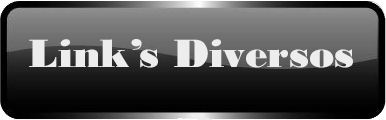
<style>
.page{position:relative;width:386px;height:120px}
.page>*{position:absolute;margin:0}
.t1{font:41.7px "BodoniMTBlack";color:#ededed}
</style>
<div class="page">
<p class="t1" style="left:29px;top:39px;width:324px;height:29px">Link’s Diversos</p>
</div>
